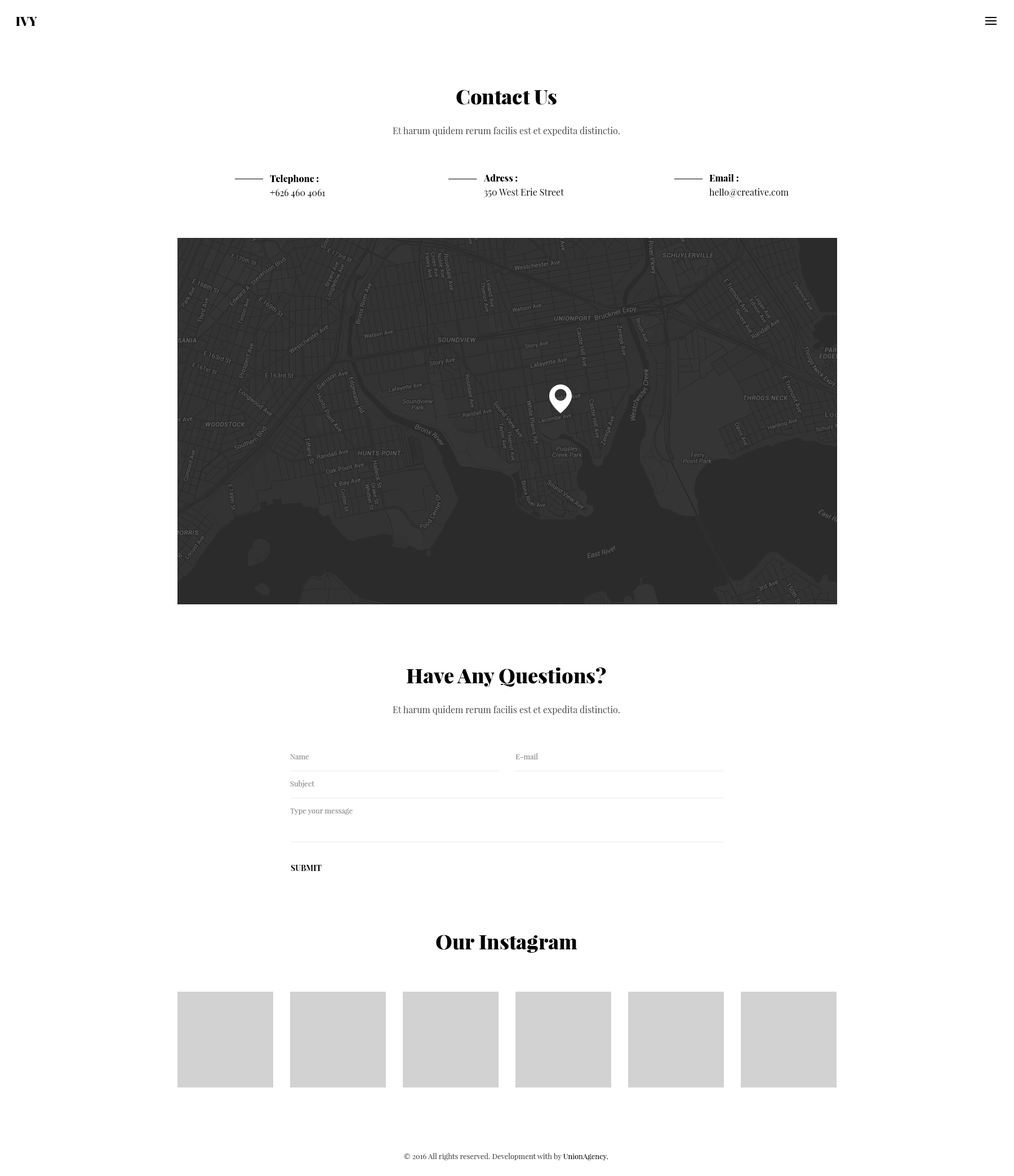
<style>
.page{position:relative;width:1014px;height:1176px;background:#ffffff}
.page>*{position:absolute;margin:0}
.t1{font:12.4px "PlayfairDisplay-Black";color:#000000}
.t2{font:20.3px "PlayfairDisplay-Black";color:#000000}
.t3{font:9px "PlayfairDisplay-Regular";color:#494949}
.t4{font:9px/14.1px "PlayfairDisplay-Regular";color:#000000}
.t5{font:9px/14.1px "PlayfairDisplay-Black";color:#000000}
.t6{font:9.1px/14.2px "PlayfairDisplay-Regular";color:#000000}
.t7{font:9.1px/14.2px "PlayfairDisplay-Black";color:#000000}
.t8{font:7.3px "PlayfairDisplay-Regular";color:#898989}
.t9{font:7.9px "PlayfairDisplay-Bold";color:#000000}
.t10{font:7.3px "PlayfairDisplay-Regular";color:#494949}
.t11{font:7.3px "PlayfairDisplay-Regular";color:#000000}
</style>
<div class="page">
<p class="t1" style="left:16px;top:17px;width:21px;height:9px">IVY</p>
<p class="t2" style="left:456px;top:90px;width:101px;height:15px">Contact Us</p>
<p class="t3" style="left:393px;top:126px;width:227px;height:10px">Et harum quidem rerum facilis est et expedita distinctio.</p>
<p class="t4" style="left:270px;top:175px;width:56px;height:23px"><span class="t5">Telephone : <br></span>+626 460 4061</p>
<p class="t6" style="left:484px;top:174px;width:81px;height:23px"><span class="t7">Adress : <br></span>350 West Erie Street</p>
<p class="t4" style="left:709px;top:174px;width:80px;height:23px"><span class="t5">Email : <br></span>hello@creative.com</p>
<p class="t2" style="left:407px;top:667px;width:199px;height:19px">Have Any Questions?</p>
<p class="t3" style="left:393px;top:705px;width:227px;height:10px">Et harum quidem rerum facilis est et expedita distinctio.</p>
<p class="t8" style="left:290px;top:754px;width:19px;height:5px">Name</p>
<p class="t8" style="left:516px;top:753px;width:22px;height:6px">E-mail</p>
<p class="t8" style="left:290px;top:780px;width:25px;height:7px">Subject</p>
<p class="t8" style="left:290px;top:808px;width:63px;height:6px">Type your message</p>
<p class="t9" style="left:291px;top:864px;width:31px;height:7px">SUBMIT</p>
<p class="t2" style="left:436px;top:934px;width:142px;height:18px">Our Instagram</p>
<p class="t10" style="left:404px;top:1152px;width:205px;height:8px">© 2016 All rights reserved. Development with by <span class="t11">UnionAgency.</span></p>
</div>
